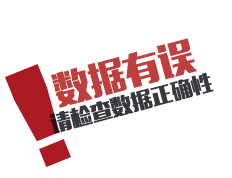
<style>
.page{position:relative;width:232px;height:178px;background:#ffffff}
.page>*{position:absolute;margin:0}
.t1{font:36px "MFLiHei_Noncommercial-Regular";color:#bf3e3e}
.t2{font:20.8px "MFLiHei_Noncommercial-Regular";color:#36383e}
</style>
<div class="page">
<p class="t1" style="left:51px;top:38px;width:147px;height:70px;rotate:-15deg">数据有误</p>
<p class="t2" style="left:49px;top:72px;width:165px;height:62px;rotate:-15deg">请检查数据正确性</p>
</div>
